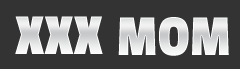
<style>
.page{position:relative;width:240px;height:69px;background:#333333}
.page>*{position:absolute;margin:0}
.t1{font:60px "PassionOne-Regular";color:#e8e9ea}
.t2{font:60px "PassionOne-Regular";color:#e7e7e8}
</style>
<div class="page">
<p class="t1" style="left:15px;top:16px;width:88px;height:38px">XXX</p>
<p class="t2" style="left:118px;top:17px;width:111px;height:39px">MOM</p>
</div>
